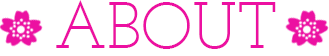
<style>
.page{position:relative;width:329px;height:56px;background:#ffffff}
.page>*{position:absolute;margin:0}
.t1{font:65px "JosefinSlab";color:#ec10a1}
</style>
<div class="page">
<p class="t1" style="left:56px;top:0px;width:220px;height:49px">ABOUT</p>
</div>
